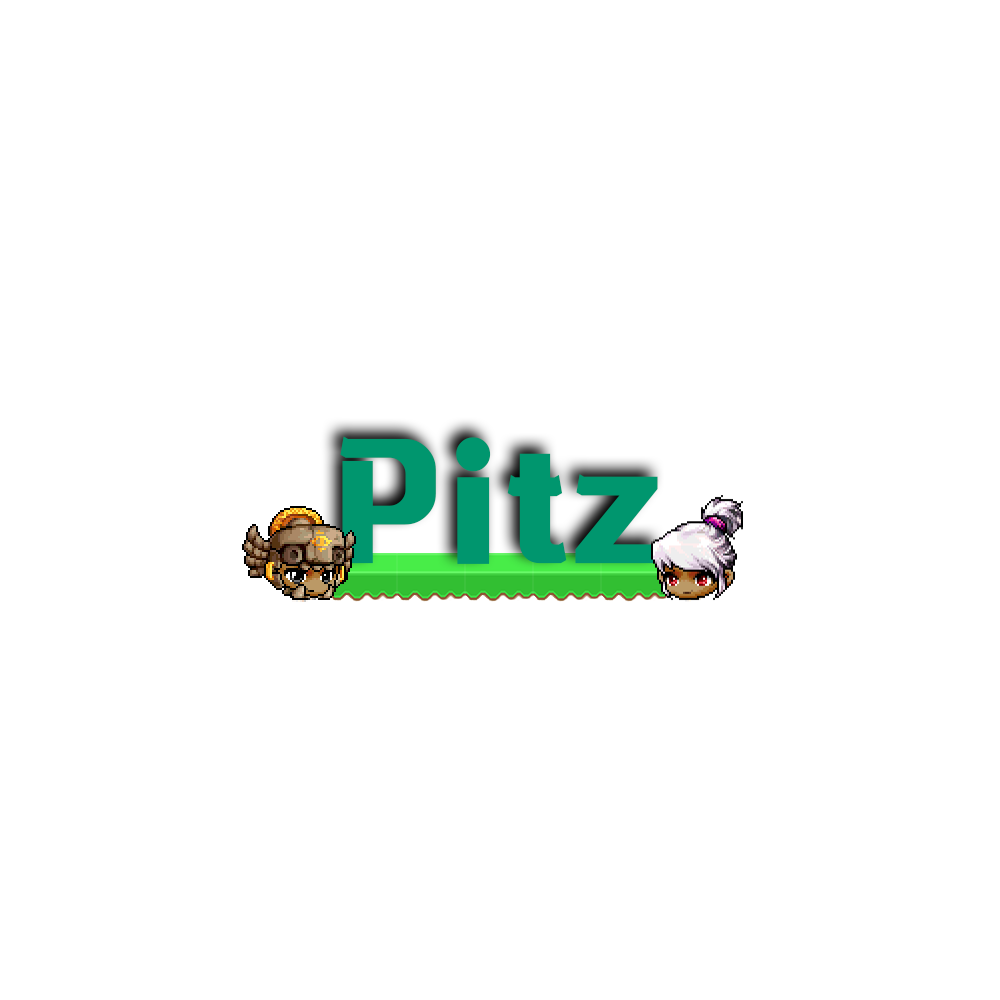
<style>
.page{position:relative;width:1000px;height:1000px;background:#ffffff}
.page>*{position:absolute;margin:0}
.t1{font:144px "BenmoJinhei";color:#00966e}
</style>
<div class="page">
<p class="t1" style="left:340px;top:436px;width:321px;height:128px">Pitz</p>
</div>
